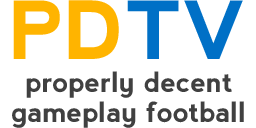
<style>
.page{position:relative;width:256px;height:128px;background:#ffffff}
.page>*{position:absolute;margin:0}
.t1{font:80px "nevis-Bold";color:#ffb400}
.t2{font:80px "nevis-Bold";color:#0070c6}
.t3{font:28px/30px "nevis-Bold";color:#404040}
</style>
<div class="page">
<p class="t1" style="left:13px;top:0px;width:230px;height:59px">PD<span class="t2">TV</span></p>
<p class="t3" style="left:12px;top:71px;width:232px;height:57px;text-align:center">properly decent<br>gameplay football</p>
</div>
